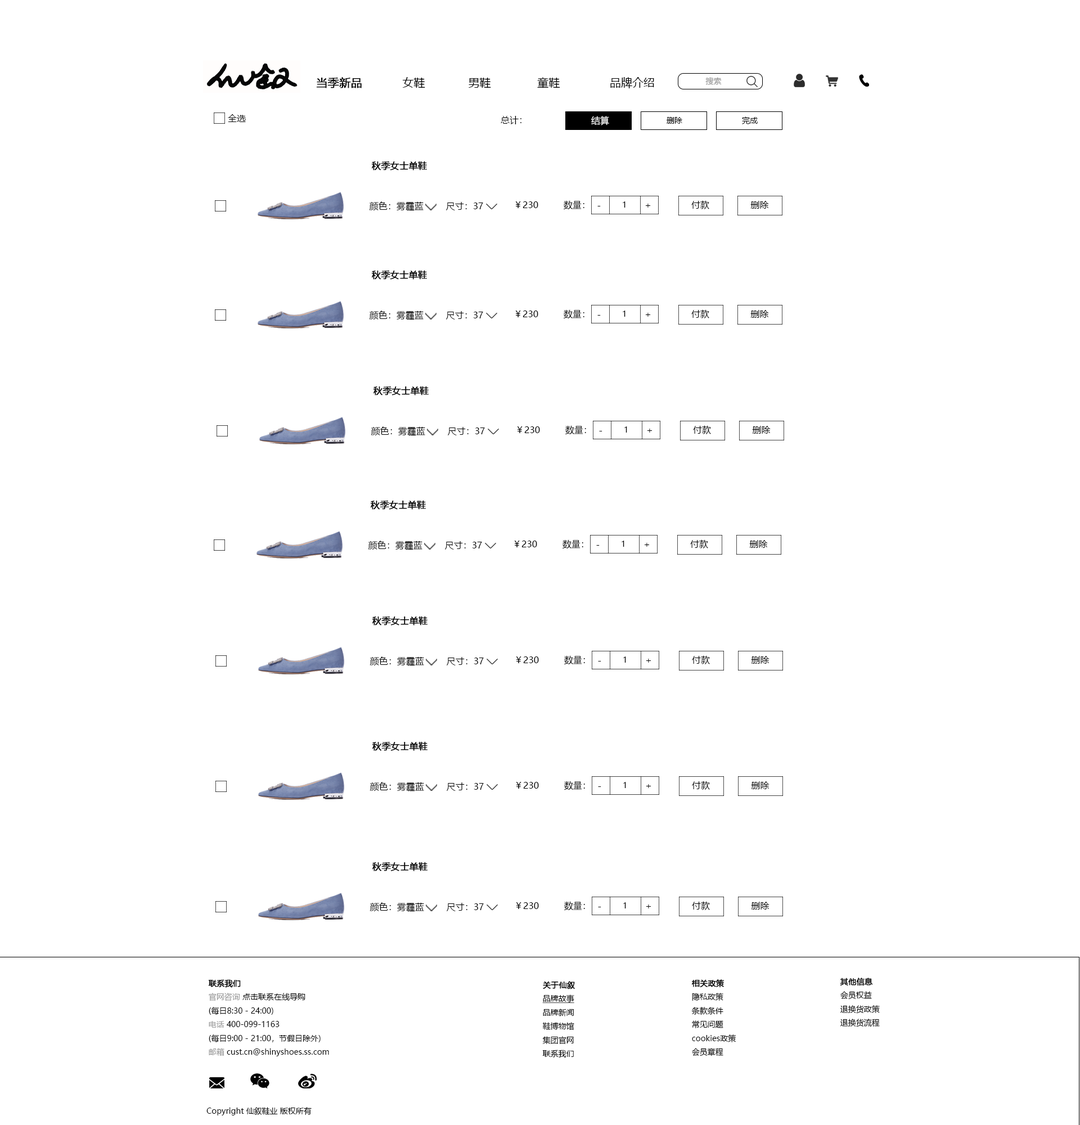
<style>
.page{position:relative;width:1080px;height:1125px;background:#ffffff}
.page>*{position:absolute;margin:0}
.t1{font:11.2px "MicrosoftYaHei";color:#000000}
.t2{font:11.2px "MicrosoftYaHei";color:#000000;font-weight:bold}
.t3{font:7.9px "MicrosoftYaHei";color:#999999}
.t4{font:9px "MicrosoftYaHei";color:#000000}
.t5{font:9px "MicrosoftYaHei";color:#ffffff}
.t6{font:7.9px "MicrosoftYaHei";color:#000000}
.t7{font:9px "MicrosoftYaHei";color:#000000;font-weight:bold}
.t8{font:7.9px "MicrosoftYaHei";color:#000000;font-weight:bold}
.t9{font:7.9px "MicrosoftYaHei";color:#000000;text-decoration:underline}
.t10{font:7.3px "MicrosoftYaHei";color:#000000}
</style>
<div class="page">
<p class="t1" style="left:316px;top:77px;width:338px;height:11px"><span class="t2">当季新品 </span>           女鞋             男鞋              童鞋               品牌介绍</p>
<p class="t3" style="left:705px;top:77px;width:17px;height:8px">搜索</p>
<p class="t4" style="left:228px;top:114px;width:18px;height:8px">全选</p>
<p class="t4" style="left:501px;top:116px;width:20px;height:8px">总计：</p>
<p class="t5" style="left:591px;top:116px;width:18px;height:9px">结算</p>
<p class="t6" style="left:667px;top:117px;width:15px;height:7px">删除</p>
<p class="t6" style="left:742px;top:116px;width:16px;height:8px">完成</p>
<p class="t7" style="left:371px;top:161px;width:56px;height:9px">秋季女士单鞋</p>
<p class="t4" style="left:369px;top:201px;width:55px;height:10px">颜色：雾霾蓝</p>
<p class="t4" style="left:446px;top:202px;width:37px;height:8px">尺寸：37</p>
<p class="t4" style="left:515px;top:201px;width:23px;height:7px">￥230</p>
<p class="t4" style="left:564px;top:200px;width:20px;height:10px">数量：</p>
<p class="t4" style="left:597px;top:206px;width:4px;height:0px">-</p>
<p class="t6" style="left:623px;top:201px;width:3px;height:7px">1</p>
<p class="t4" style="left:645px;top:204px;width:6px;height:4px">+</p>
<p class="t4" style="left:691px;top:200px;width:18px;height:9px">付款</p>
<p class="t4" style="left:750px;top:201px;width:19px;height:8px">删除</p>
<p class="t7" style="left:371px;top:270px;width:56px;height:10px">秋季女士单鞋</p>
<p class="t4" style="left:369px;top:310px;width:55px;height:10px">颜色：雾霾蓝</p>
<p class="t4" style="left:446px;top:311px;width:37px;height:9px">尺寸：37</p>
<p class="t4" style="left:515px;top:310px;width:23px;height:7px">￥230</p>
<p class="t4" style="left:564px;top:309px;width:20px;height:10px">数量：</p>
<p class="t4" style="left:597px;top:315px;width:4px;height:1px">-</p>
<p class="t6" style="left:623px;top:310px;width:3px;height:7px">1</p>
<p class="t4" style="left:645px;top:313px;width:6px;height:4px">+</p>
<p class="t4" style="left:691px;top:309px;width:18px;height:9px">付款</p>
<p class="t4" style="left:750px;top:310px;width:19px;height:8px">删除</p>
<p class="t7" style="left:373px;top:386px;width:56px;height:9px">秋季女士单鞋</p>
<p class="t4" style="left:565px;top:425px;width:21px;height:10px">数量：</p>
<p class="t4" style="left:693px;top:425px;width:18px;height:9px">付款</p>
<p class="t4" style="left:752px;top:426px;width:19px;height:8px">删除</p>
<p class="t4" style="left:371px;top:426px;width:54px;height:10px">颜色：雾霾蓝</p>
<p class="t4" style="left:448px;top:427px;width:37px;height:8px">尺寸：37</p>
<p class="t4" style="left:517px;top:426px;width:23px;height:7px">￥230</p>
<p class="t4" style="left:599px;top:431px;width:3px;height:0px">-</p>
<p class="t6" style="left:624px;top:426px;width:3px;height:7px">1</p>
<p class="t4" style="left:647px;top:429px;width:5px;height:4px">+</p>
<p class="t7" style="left:370px;top:500px;width:56px;height:10px">秋季女士单鞋</p>
<p class="t4" style="left:368px;top:541px;width:54px;height:9px">颜色：雾霾蓝</p>
<p class="t4" style="left:445px;top:541px;width:37px;height:9px">尺寸：37</p>
<p class="t4" style="left:514px;top:541px;width:23px;height:6px">￥230</p>
<p class="t4" style="left:562px;top:539px;width:21px;height:10px">数量：</p>
<p class="t4" style="left:596px;top:545px;width:4px;height:1px">-</p>
<p class="t6" style="left:622px;top:541px;width:2px;height:6px">1</p>
<p class="t4" style="left:644px;top:543px;width:6px;height:4px">+</p>
<p class="t4" style="left:690px;top:539px;width:18px;height:9px">付款</p>
<p class="t4" style="left:749px;top:540px;width:19px;height:8px">删除</p>
<p class="t7" style="left:372px;top:616px;width:56px;height:10px">秋季女士单鞋</p>
<p class="t4" style="left:370px;top:656px;width:54px;height:10px">颜色：雾霾蓝</p>
<p class="t4" style="left:447px;top:657px;width:37px;height:8px">尺寸：37</p>
<p class="t4" style="left:516px;top:656px;width:23px;height:7px">￥230</p>
<p class="t4" style="left:564px;top:655px;width:21px;height:10px">数量：</p>
<p class="t4" style="left:598px;top:661px;width:3px;height:1px">-</p>
<p class="t6" style="left:623px;top:656px;width:3px;height:7px">1</p>
<p class="t4" style="left:646px;top:659px;width:5px;height:4px">+</p>
<p class="t4" style="left:692px;top:655px;width:18px;height:9px">付款</p>
<p class="t4" style="left:751px;top:656px;width:19px;height:8px">删除</p>
<p class="t7" style="left:372px;top:741px;width:56px;height:10px">秋季女士单鞋</p>
<p class="t4" style="left:370px;top:782px;width:54px;height:9px">颜色：雾霾蓝</p>
<p class="t4" style="left:447px;top:782px;width:37px;height:9px">尺寸：37</p>
<p class="t4" style="left:516px;top:782px;width:23px;height:7px">￥230</p>
<p class="t4" style="left:564px;top:781px;width:21px;height:9px">数量：</p>
<p class="t6" style="left:623px;top:782px;width:3px;height:6px">1</p>
<p class="t4" style="left:646px;top:784px;width:5px;height:4px">+</p>
<p class="t4" style="left:692px;top:781px;width:18px;height:9px">付款</p>
<p class="t4" style="left:751px;top:781px;width:19px;height:8px">删除</p>
<p class="t4" style="left:598px;top:786px;width:3px;height:1px">-</p>
<p class="t7" style="left:372px;top:862px;width:56px;height:9px">秋季女士单鞋</p>
<p class="t4" style="left:370px;top:902px;width:54px;height:10px">颜色：雾霾蓝</p>
<p class="t4" style="left:447px;top:903px;width:37px;height:8px">尺寸：37</p>
<p class="t4" style="left:516px;top:902px;width:23px;height:7px">￥230</p>
<p class="t4" style="left:564px;top:901px;width:21px;height:10px">数量：</p>
<p class="t6" style="left:623px;top:902px;width:3px;height:6px">1</p>
<p class="t4" style="left:646px;top:904px;width:5px;height:4px">+</p>
<p class="t4" style="left:692px;top:901px;width:18px;height:9px">付款</p>
<p class="t4" style="left:751px;top:902px;width:19px;height:8px">删除</p>
<p class="t4" style="left:598px;top:907px;width:3px;height:0px">-</p>
<p class="t6" style="left:840px;top:978px;width:40px;height:49px"><span class="t8">其他信息<br></span>会员权益<br>退换货政策<br>退换货流程</p>
<p class="t6" style="left:208px;top:979px;width:121px;height:77px"><span class="t8">联系我们<br></span><span class="t3">官网咨询</span> 点击联系在线导购<br>(每日8:30 - 24:00)<br><span class="t3">电话 </span>400-099-1163<br>(每日9:00 - 21:00，节假日除外)<br><span class="t3">邮箱 </span>cust.cn@shinyshoes.ss.com</p>
<p class="t6" style="left:542px;top:981px;width:33px;height:77px"><span class="t8">关于仙叙<br></span><span class="t9">品牌故事<br></span>品牌新闻<br>鞋博物馆<br>集团官网<br>联系我们</p>
<p class="t6" style="left:691px;top:979px;width:45px;height:77px"><span class="t8">相关政策<br></span>隐私政策<br>条款条件<br>常见问题<br>cookies政策<br>会员章程</p>
<p class="t6" style="left:206px;top:1107px;width:106px;height:8px">Copyright 仙叙鞋业 版权所有<br><span class="t10"><br>Copyright 仙叙鞋业 版权所有</span></p>
</div>
